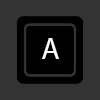
<style>
.page{position:relative;width:100px;height:100px;background:#333333}
.page>*{position:absolute;margin:0}
.t1{font:30px "MyriadPro-Regular";color:#ffffff}
</style>
<div class="page">
<p class="t1" style="left:42px;top:38px;width:17px;height:21px">A</p>
</div>
